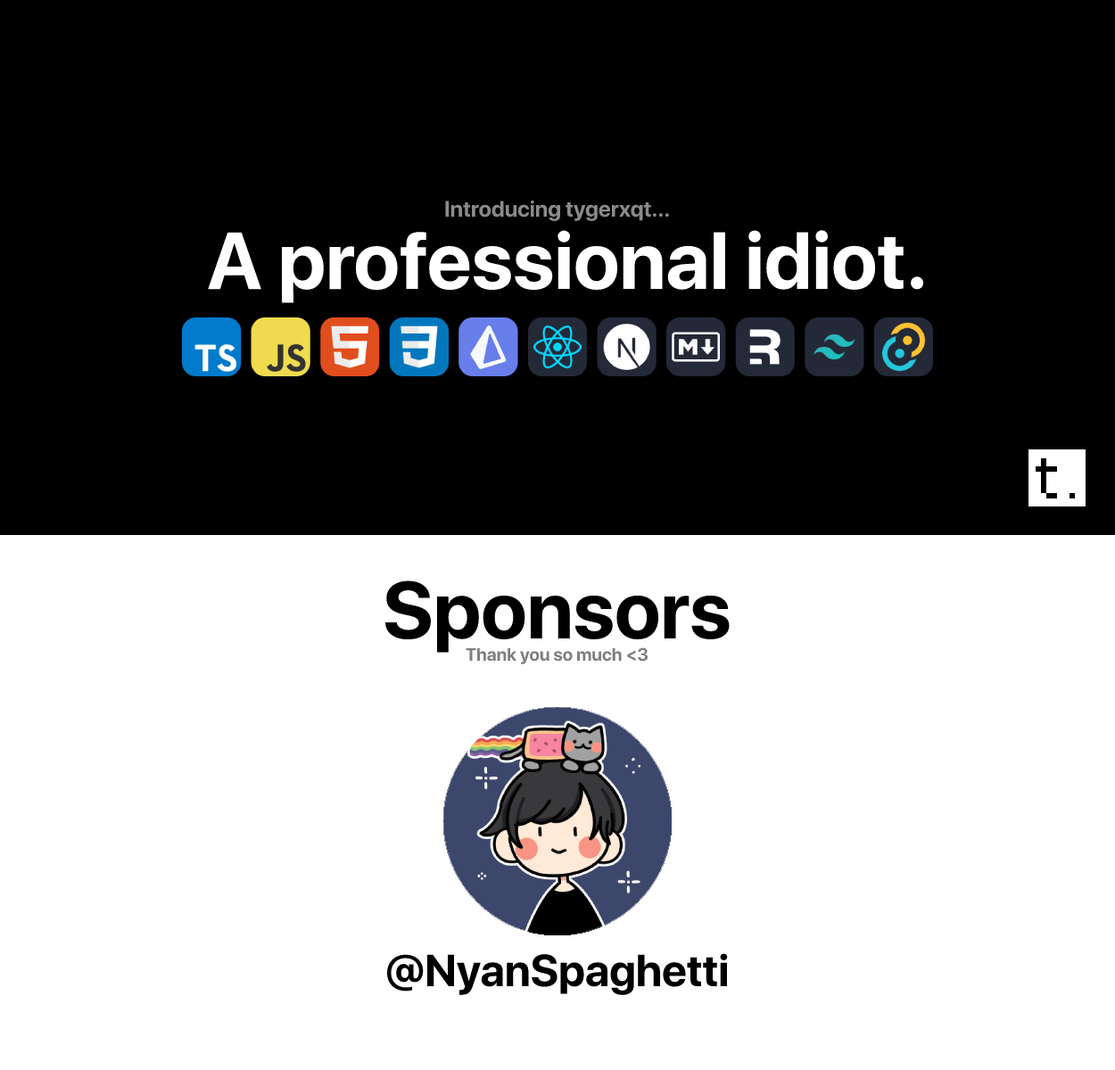
<style>
.page{position:relative;width:1115px;height:1070px;background:#ffffff}
.page>*{position:absolute;margin:0}
.t1{font:22.3px "SFProDisplay-Bold";color:#8a8a8a}
.t2{font:80.2px "SFProDisplay-Bold";color:#ffffff}
.t3{font:80.2px "SFProDisplay-Bold";color:#000000}
.t4{font:17.8px "SFProDisplay-Bold";color:#7f7f7f}
.t5{font:44.6px "SFProDisplay-Bold";color:#000000}
</style>
<div class="page">
<p class="t1" style="left:445px;top:200px;width:224px;height:21px">Introducing tygerxqt...</p>
<p class="t2" style="left:208px;top:230px;width:716px;height:73px">A professional idiot.</p>
<p class="t3" style="left:384px;top:580px;width:345px;height:73px">Sponsors</p>
<p class="t4" style="left:465px;top:647px;width:183px;height:17px">Thank you so much &lt;3</p>
<p class="t5" style="left:386px;top:953px;width:342px;height:42px">@NyanSpaghetti</p>
</div>
